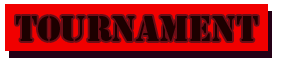
<style>
.page{position:relative;width:300px;height:60px;background:#f10000}
.page>*{position:absolute;margin:0}
.t1{font:33.3px "StencilStd";color:#1d0000}
</style>
<div class="page">
<p class="t1" style="left:16px;top:16px;width:242px;height:25px">Tournament</p>
</div>
